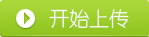
<style>
.page{position:relative;width:149px;height:37px}
.page>*{position:absolute;margin:0}
.t1{font:20px "YouYuan";color:#fcfcff}
</style>
<div class="page">
<p class="t1" style="left:49px;top:9px;width:80px;height:19px">开始上传</p>
</div>
